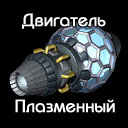
<style>
.page{position:relative;width:128px;height:128px;background:#000000}
.page>*{position:absolute;margin:0}
.t1{font:18px "BauhausC-Medium";color:#ffffff;font-weight:bold}
</style>
<div class="page">
<p class="t1" style="left:22px;top:13px;width:84px;height:16px">Двигатель</p>
<p class="t1" style="left:15px;top:99px;width:100px;height:14px">Плазменный</p>
</div>
